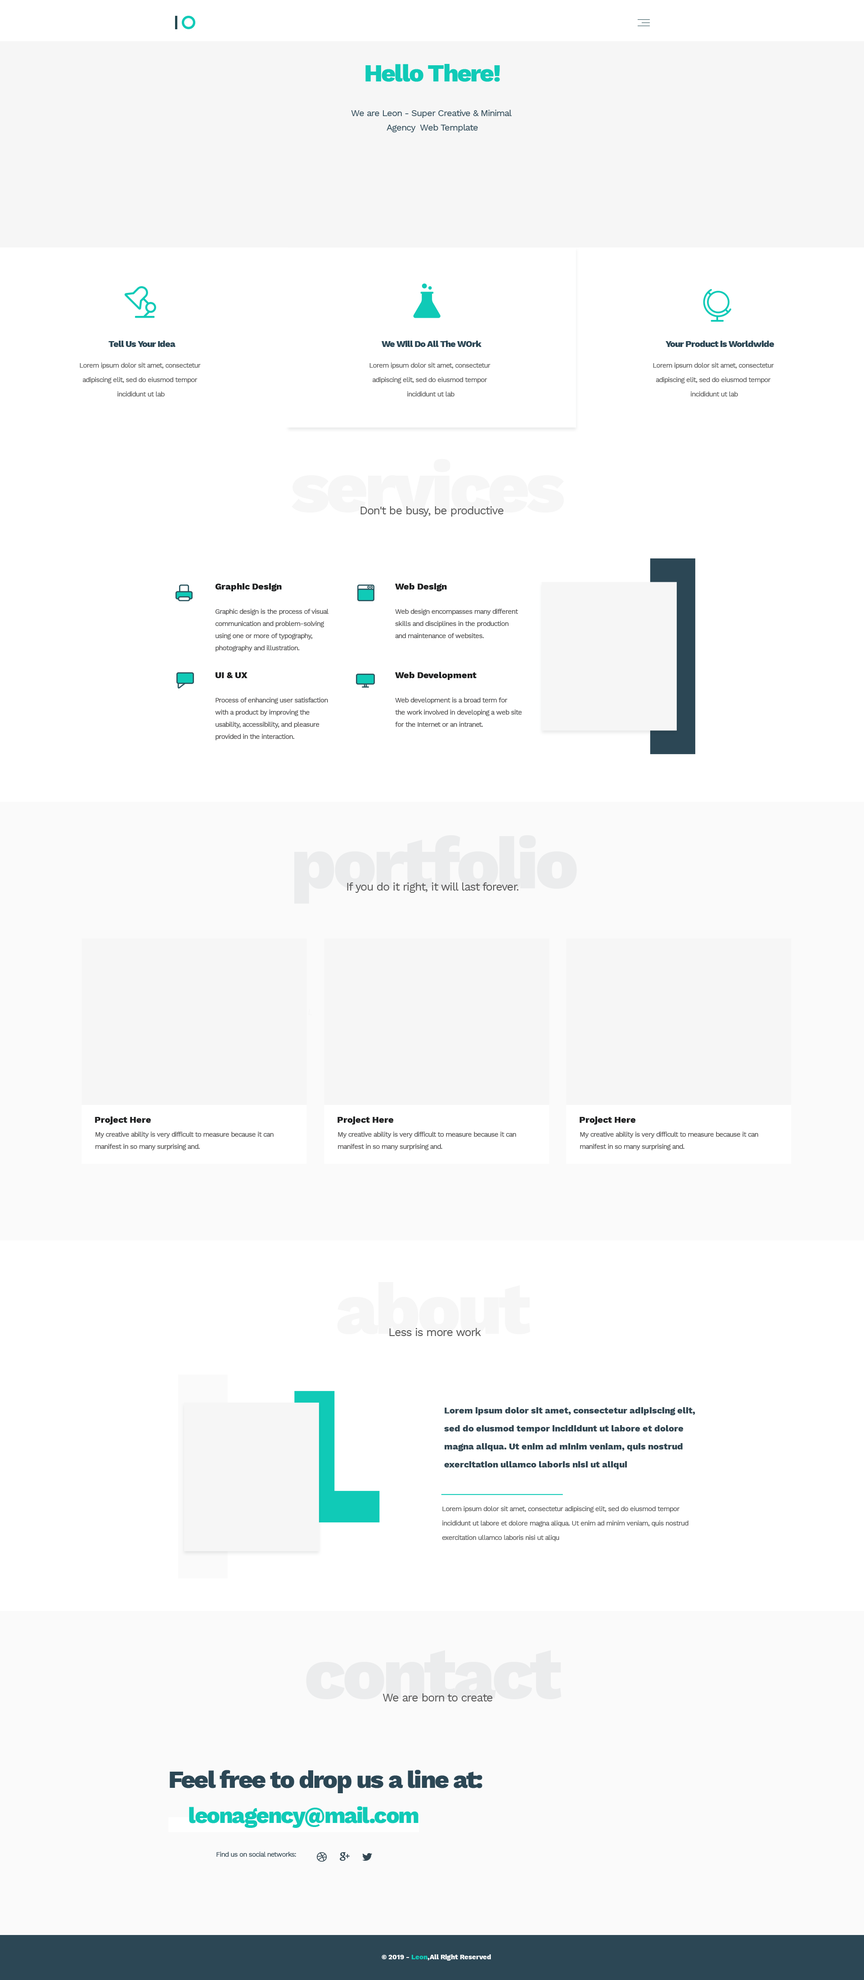
<style>
.page{position:relative;width:864px;height:1980px;background:#ffffff}
.page>*{position:absolute;margin:0}
.t1{font:24.9px "WorkSans-ExtraBold";letter-spacing:-0.05em;color:#10cab7}
.t2{font:9px/14.4px "WorkSans-Regular";letter-spacing:-0.05em;color:#2c4755}
.t3{font:9px "WorkSans-ExtraBold";letter-spacing:-0.05em;color:#2c4755}
.t4{font:6.8px/14.4px "WorkSans-Regular";letter-spacing:-0.05em;color:#575757}
.t5{font:11.2px "WorkSans-Regular";letter-spacing:-0.05em;color:#575757}
.t6{font:9px "WorkSans-ExtraBold";color:#1f2021}
.t7{font:6.8px/12.2px "WorkSans-Regular";letter-spacing:-0.05em;color:#4d4c4c}
.t8{font:9px/18px "WorkSans-ExtraBold";color:#334752}
.t9{font:72.8px "WorkSans-ExtraBold";letter-spacing:-0.05em;color:#ebeced}
.t10{font:24.9px "WorkSans-ExtraBold";letter-spacing:-0.05em;color:#2c4755}
.t11{font:22.5px "WorkSans-ExtraBold";letter-spacing:-0.05em;color:#10cab7}
.t12{font:6.8px "WorkSans-Regular";letter-spacing:-0.05em;color:#334752}
.t13{font:6.8px "WorkSans-ExtraBold";color:#ffffff}
.t14{font:6.8px "WorkSans-ExtraBold";color:#10cab7}
</style>
<div class="page">
<p class="t1" style="left:365px;top:64px;width:135px;height:18px">Hello There!</p>
<p class="t2" style="left:351px;top:110px;width:161px;height:22px;text-align:center">We are Leon - Super Creative &amp; Minimal <br>Agency  Web Template</p>
<p class="t3" style="left:108px;top:341px;width:68px;height:6px">Tell Us Your Idea</p>
<p class="t3" style="left:382px;top:341px;width:100px;height:6px">We Will Do All The WOrk</p>
<p class="t3" style="left:666px;top:341px;width:108px;height:6px">Your Product is Worldwide</p>
<p class="t4" style="left:80px;top:363px;width:121px;height:33px;text-align:center">Lorem ipsum dolor sit amet, consectetur <br>adipiscing elit, sed do eiusmod tempor <br>incididunt ut lab</p>
<p class="t4" style="left:369px;top:363px;width:121px;height:33px;text-align:center">Lorem ipsum dolor sit amet, consectetur <br>adipiscing elit, sed do eiusmod tempor <br>incididunt ut lab</p>
<p class="t4" style="left:653px;top:363px;width:121px;height:33px;text-align:center">Lorem ipsum dolor sit amet, consectetur <br>adipiscing elit, sed do eiusmod tempor <br>incididunt ut lab</p>
<p class="t5" style="left:360px;top:506px;width:144px;height:11px">Don't be busy, be productive</p>
<p class="t6" style="left:215px;top:583px;width:67px;height:8px">Graphic Design</p>
<p class="t6" style="left:395px;top:583px;width:52px;height:8px">Web Design</p>
<p class="t7" style="left:215px;top:609px;width:114px;height:43px">Graphic design is the process of visual <br>communication and problem-solving <br>using one or more of typography, <br>photography and illustration.</p>
<p class="t7" style="left:395px;top:609px;width:123px;height:29px">Web design encompasses many different <br>skills and disciplines in the production <br>and maintenance of websites.</p>
<p class="t6" style="left:215px;top:672px;width:33px;height:6px">UI &amp; UX</p>
<p class="t6" style="left:395px;top:672px;width:82px;height:8px">Web Development</p>
<p class="t7" style="left:215px;top:698px;width:113px;height:42px">Process of enhancing user satisfaction <br>with a product by improving the <br>usability, accessibility, and pleasure <br>provided in the interaction.</p>
<p class="t7" style="left:395px;top:698px;width:127px;height:29px">Web development is a broad term for <br>the work involved in developing a web site <br>for the Internet or an intranet.</p>
<p class="t5" style="left:347px;top:882px;width:171px;height:11px">If you do it right, it will last forever.</p>
<p class="t6" style="left:95px;top:1116px;width:56px;height:9px">Project Here</p>
<p class="t6" style="left:338px;top:1116px;width:56px;height:9px">Project Here</p>
<p class="t6" style="left:580px;top:1116px;width:56px;height:9px">Project Here</p>
<p class="t7" style="left:95px;top:1132px;width:179px;height:18px">My creative ability is very difficult to measure because it can <br>manifest in so many surprising and.</p>
<p class="t7" style="left:338px;top:1132px;width:178px;height:18px">My creative ability is very difficult to measure because it can <br>manifest in so many surprising and.</p>
<p class="t7" style="left:580px;top:1132px;width:178px;height:18px">My creative ability is very difficult to measure because it can <br>manifest in so many surprising and.</p>
<p class="t5" style="left:389px;top:1328px;width:92px;height:8px">Less is more work</p>
<p class="t8" style="left:444px;top:1407px;width:251px;height:62px">Lorem ipsum dolor sit amet, consectetur adipiscing elit, <br>sed do eiusmod tempor incididunt ut labore et dolore <br>magna aliqua. Ut enim ad minim veniam, quis nostrud <br>exercitation ullamco laboris nisi ut aliqui</p>
<p class="t4" style="left:442px;top:1506px;width:246px;height:35px">Lorem ipsum dolor sit amet, consectetur adipiscing elit, sed do eiusmod tempor <br>incididunt ut labore et dolore magna aliqua. Ut enim ad minim veniam, quis nostrud <br>exercitation ullamco laboris nisi ut aliqu</p>
<p class="t9" style="left:306px;top:1650px;width:256px;height:49px">contact</p>
<p class="t5" style="left:382px;top:1693px;width:111px;height:8px">We are born to create</p>
<p class="t10" style="left:170px;top:1770px;width:312px;height:23px">Feel free to drop us a line at:</p>
<p class="t11" style="left:189px;top:1806px;width:229px;height:22px">leonagency@mail.com</p>
<p class="t12" style="left:216px;top:1852px;width:80px;height:5px">Find us on social networks:</p>
<p class="t13" style="left:382px;top:1954px;width:109px;height:7px">© 2019 - <span class="t14">Leon</span>,All Right Reserved</p>
</div>
